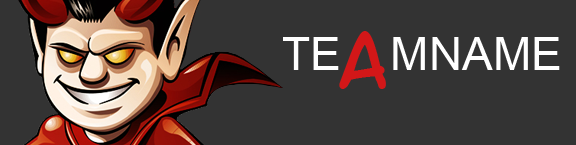
<style>
.page{position:relative;width:576px;height:145px;background:#333333}
.page>*{position:absolute;margin:0}
.t1{font:46px "ArialMT";color:#ffffff;text-transform:uppercase}
.t2{font:67px "LetterOMatic";color:#d31718;text-transform:uppercase}
</style>
<div class="page">
<p class="t1" style="left:283px;top:37px;width:277px;height:33px">TE   MNAME</p>
<p class="t2" style="left:339px;top:31px;width:47px;height:58px">a</p>
</div>
